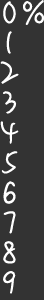
<style>
.page{position:relative;width:44px;height:300px;background:#333333}
.page>*{position:absolute;margin:0}
.t1{font:32px "MLingWaiMedium-SC";letter-spacing:0.1em;color:#ffffff;text-transform:uppercase;font-weight:bold}
</style>
<div class="page">
<p class="t1" style="left:3px;top:0px;width:41px;height:25px">0%</p>
<p class="t1" style="left:6px;top:31px;width:6px;height:23px">1</p>
<p class="t1" style="left:0px;top:61px;width:19px;height:23px">2</p>
<p class="t1" style="left:3px;top:91px;width:14px;height:23px">3</p>
<p class="t1" style="left:0px;top:121px;width:19px;height:23px">4</p>
<p class="t1" style="left:1px;top:151px;width:17px;height:23px">5</p>
<p class="t1" style="left:3px;top:181px;width:13px;height:23px">6</p>
<p class="t1" style="left:3px;top:211px;width:13px;height:23px">7</p>
<p class="t1" style="left:3px;top:241px;width:13px;height:23px">8</p>
<p class="t1" style="left:3px;top:271px;width:13px;height:23px">9</p>
</div>
